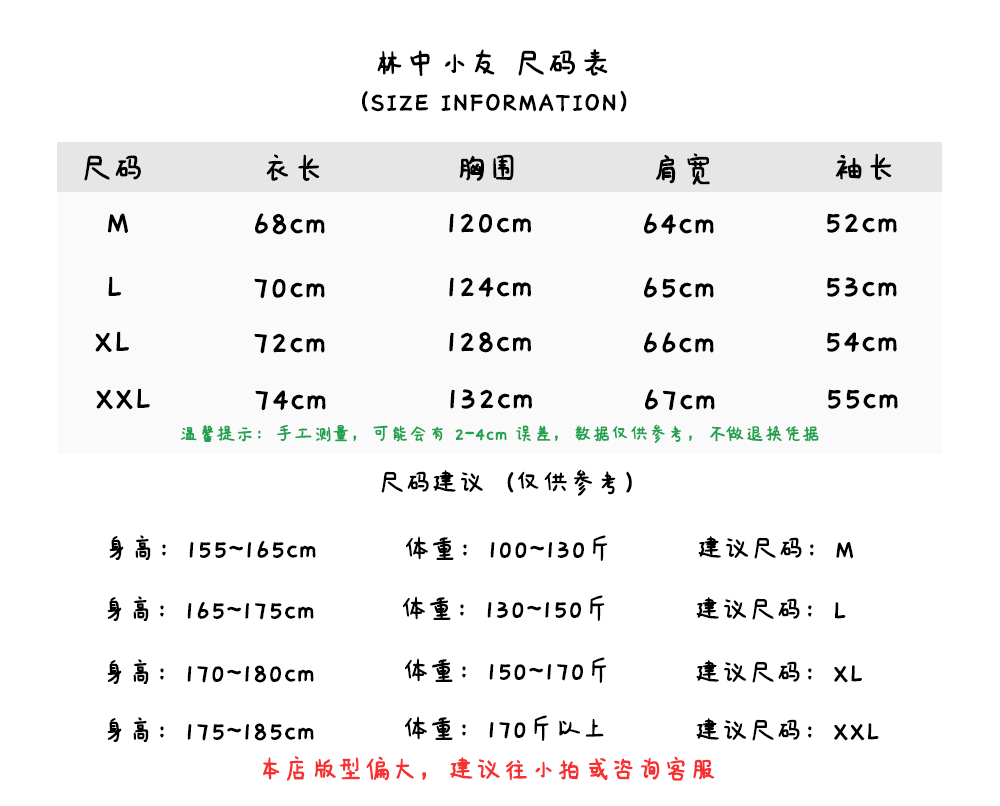
<style>
.page{position:relative;width:1000px;height:806px;background:#ffffff}
.page>*{position:absolute;margin:0}
.t1{font:36px "IdeaFonts-QianXiaTi";color:#000000;font-weight:bold}
.t2{font:30px "IdeaFonts-QianXiaTi";color:#000000;font-weight:bold}
.t3{font:21px "IdeaFonts-QianXiaTi";color:#21a24f;font-weight:bold}
.t4{font:30px "IdeaFonts-QianXiaTi";color:#f73131;font-weight:bold}
</style>
<div class="page">
<p class="t1" style="left:377px;top:49px;width:231px;height:28px">林中小友 尺码表</p>
<p class="t2" style="left:362px;top:90px;width:265px;height:22px">（SIZE INFORMATION）</p>
<p class="t1" style="left:84px;top:155px;width:57px;height:26px">尺码</p>
<p class="t1" style="left:266px;top:154px;width:54px;height:27px">衣长</p>
<p class="t1" style="left:459px;top:154px;width:55px;height:27px">胸围</p>
<p class="t1" style="left:656px;top:153px;width:54px;height:32px">肩宽</p>
<p class="t1" style="left:835px;top:153px;width:57px;height:27px">袖长</p>
<p class="t1" style="left:108px;top:213px;width:20px;height:20px">M</p>
<p class="t1" style="left:255px;top:213px;width:70px;height:22px">68cm</p>
<p class="t1" style="left:449px;top:213px;width:82px;height:20px">120cm</p>
<p class="t1" style="left:644px;top:213px;width:70px;height:21px">64cm</p>
<p class="t1" style="left:827px;top:213px;width:70px;height:20px">52cm</p>
<p class="t1" style="left:108px;top:276px;width:14px;height:20px">L</p>
<p class="t1" style="left:254px;top:278px;width:71px;height:21px">70cm</p>
<p class="t1" style="left:449px;top:277px;width:82px;height:20px">124cm</p>
<p class="t1" style="left:644px;top:277px;width:70px;height:21px">65cm</p>
<p class="t1" style="left:827px;top:277px;width:70px;height:20px">53cm</p>
<p class="t1" style="left:95px;top:331px;width:34px;height:22px">XL</p>
<p class="t1" style="left:254px;top:333px;width:71px;height:21px">72cm</p>
<p class="t1" style="left:449px;top:332px;width:82px;height:21px">128cm</p>
<p class="t1" style="left:644px;top:332px;width:70px;height:21px">66cm</p>
<p class="t1" style="left:827px;top:332px;width:70px;height:20px">54cm</p>
<p class="t1" style="left:96px;top:388px;width:54px;height:22px">XXL</p>
<p class="t1" style="left:255px;top:390px;width:71px;height:21px">74cm</p>
<p class="t1" style="left:450px;top:389px;width:82px;height:20px">132cm</p>
<p class="t1" style="left:645px;top:389px;width:70px;height:22px">67cm</p>
<p class="t1" style="left:828px;top:389px;width:70px;height:20px">55cm</p>
<p class="t3" style="left:181px;top:424px;width:638px;height:19px">温馨提示：手工测量，可能会有 2-4cm 误差，数据仅供参考，不做退换凭据</p>
<p class="t2" style="left:381px;top:469px;width:251px;height:27px">尺码建议（仅供参考）</p>
<p class="t2" style="left:109px;top:535px;width:207px;height:25px">身高：155~165cm</p>
<p class="t2" style="left:406px;top:535px;width:202px;height:26px">体重：100~130斤</p>
<p class="t2" style="left:698px;top:536px;width:156px;height:23px">建议尺码：M</p>
<p class="t2" style="left:107px;top:596px;width:207px;height:25px">身高：165~175cm</p>
<p class="t2" style="left:403px;top:595px;width:202px;height:26px">体重：130~150斤</p>
<p class="t2" style="left:696px;top:597px;width:150px;height:23px">建议尺码：L</p>
<p class="t2" style="left:107px;top:659px;width:207px;height:25px">身高：170~180cm</p>
<p class="t2" style="left:405px;top:657px;width:202px;height:26px">体重：150~170斤</p>
<p class="t2" style="left:696px;top:660px;width:166px;height:23px">建议尺码：XL</p>
<p class="t2" style="left:107px;top:717px;width:207px;height:25px">身高：175~185cm</p>
<p class="t2" style="left:405px;top:715px;width:199px;height:26px">体重：170斤以上</p>
<p class="t2" style="left:696px;top:718px;width:183px;height:23px">建议尺码：XXL</p>
<p class="t4" style="left:263px;top:756px;width:452px;height:25px">本店版型偏大，建议往小拍或咨询客服</p>
</div>
